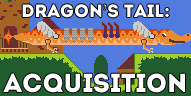
<style>
.page{position:relative;width:191px;height:96px;background:#517bde}
.page>*{position:absolute;margin:0}
.t1{font:26px "Intro";color:#ffffff;text-transform:uppercase}
.t2{font:18px "Intro";color:#ffffff;text-transform:uppercase}
.t3{font:18px "ImprintMT-Shadow";color:#ffffff;text-transform:uppercase}
.t4{font:12px "Intro";color:#ffffff;text-transform:uppercase}
</style>
<div class="page">
<p class="t1" style="left:3px;top:4px;width:182px;height:89px;text-align:center"><span class="t2">DRAGON</span><span class="t3">’</span><span class="t2">s TaIl:<br></span><span class="t4"><br><br><br></span>Acquisition</p>
</div>
